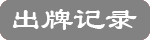
<style>
.page{position:relative;width:150px;height:40px;background:#828282}
.page>*{position:absolute;margin:0}
.t1{font:32px "STBaoli-SC-Regular";color:#ffffff}
</style>
<div class="page">
<p class="t1" style="left:12px;top:9px;width:125px;height:21px">出牌记录</p>
<p class="t1" style="left:12px;top:9px;width:125px;height:21px">出牌记录</p>
<p class="t1" style="left:12px;top:9px;width:125px;height:21px">出牌记录</p>
</div>
